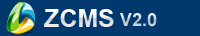
<style>
.page{position:relative;width:200px;height:36px;background:#01386e}
.page>*{position:absolute;margin:0}
.t1{font:25px "Arial-BoldMT";color:#ffffff}
.t2{font:18px "Arial-BoldMT"}
</style>
<div class="page">
<p class="t1" style="left:44px;top:9px;width:70px;height:18px">ZCMS</p>
<p class="t2" style="left:120px;top:13px;width:37px;height:14px">V2.0</p>
</div>
